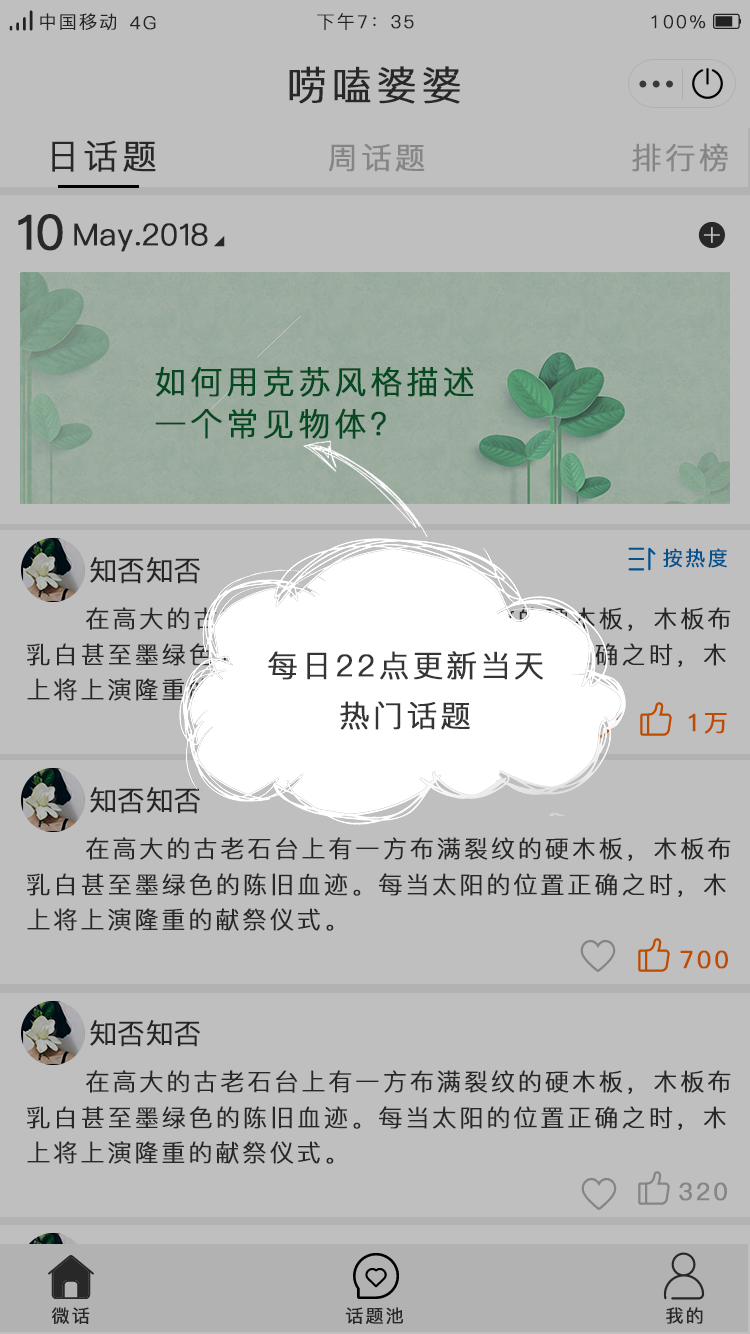
<style>
.page{position:relative;width:750px;height:1334px;background:#bfbfbf}
.page>*{position:absolute;margin:0}
.t1{font:18px "PingFang-SC-Regular";letter-spacing:0.1em;color:#323232;font-weight:bold}
.t2{font:40px "PingFang-SC-Regular";letter-spacing:0.1em;color:#353535;font-weight:bold}
.t3{font:34px "PingFang-SC-Regular";letter-spacing:0.1em;color:#353535;font-weight:bold}
.t4{font:30px "PingFang-SC-Regular";letter-spacing:0.1em;color:#858585;font-weight:bold}
.t5{font:48px "PingFang-SC-Medium";letter-spacing:0.1em;color:#353535;font-weight:bold}
.t6{font:30px "PingFang-SC-Regular";letter-spacing:0.1em;color:#353535;font-weight:bold}
.t7{font:32px/42px "PingFang-SC-Regular";letter-spacing:0.1em;color:#044922;font-weight:bold}
.t8{font:28px "PingFang-SC-Regular";letter-spacing:0.1em;color:#323232;font-weight:bold}
.t9{font:20px "PingFang-SC-Medium";letter-spacing:0.1em;color:#03528e;font-weight:bold}
.t10{font:24px "PingFang-SC-Regular";letter-spacing:0.1em;font-weight:bold}
.t11{font:24px "PingFang-SC-Medium";letter-spacing:0.1em;color:#bd4c02;font-weight:bold}
.t12{font:24px "PingFang-SC-Regular";letter-spacing:0.1em;color:#353535;font-weight:bold}
.t13{font:24px "PingFang-SC-Regular";letter-spacing:0.1em;color:#323232;font-weight:bold}
.t14{font:24px "PingFang-SC-Medium";letter-spacing:0.1em;color:#858585;font-weight:bold}
.t15{font:18px "PingFang-SC-Medium";letter-spacing:0.1em;color:#353535;font-weight:bold}
</style>
<div class="page">
<p class="t1" style="left:40px;top:13px;width:76px;height:18px">中国移动</p>
<p class="t1" style="left:130px;top:16px;width:26px;height:14px">4G</p>
<p class="t1" style="left:317px;top:13px;width:97px;height:17px">下午7：35</p>
<p class="t1" style="left:651px;top:15px;width:55px;height:14px">100%</p>
<p class="t2" style="left:289px;top:66px;width:171px;height:38px">唠嗑婆婆</p>
<p class="t3" style="left:52px;top:140px;width:104px;height:32px">日话题</p>
<p class="t4" style="left:329px;top:144px;width:96px;height:28px">周话题</p>
<p class="t4" style="left:632px;top:143px;width:96px;height:29px">排行榜</p>
<p class="t5" style="left:18px;top:214px;width:45px;height:37px">10</p>
<p class="t6" style="left:74px;top:223px;width:134px;height:29px">May.2018</p>
<p class="t7" style="left:155px;top:366px;width:319px;height:73px">如何用克苏风格描述<br>一个常见物体？</p>
<p class="t8" style="left:90px;top:557px;width:110px;height:27px">知否知否</p>
<p class="t9" style="left:663px;top:548px;width:64px;height:20px">按热度</p>
<p class="t10" style="left:86px;top:607px;width:645px;height:24px">在高大的古老石台上有一方布满裂纹的硬木板，木板布</p>
<p class="t10" style="left:27px;top:643px;width:699px;height:24px">乳白甚至墨绿色的陈旧血迹。每当太阳的位置正确之时，木</p>
<p class="t6" style="left:268px;top:651px;width:275px;height:29px">每日22点更新当天</p>
<p class="t10" style="left:27px;top:678px;width:307px;height:23px">上将上演隆重的献祭仪式。</p>
<p class="t6" style="left:340px;top:701px;width:130px;height:29px">热门话题</p>
<p class="t11" style="left:688px;top:713px;width:39px;height:21px">1万</p>
<p class="t8" style="left:90px;top:787px;width:110px;height:27px">知否知否</p>
<p class="t12" style="left:86px;top:837px;width:645px;height:24px">在高大的古老石台上有一方布满裂纹的硬木板，木板布</p>
<p class="t12" style="left:27px;top:873px;width:699px;height:24px">乳白甚至墨绿色的陈旧血迹。每当太阳的位置正确之时，木</p>
<p class="t12" style="left:27px;top:908px;width:307px;height:23px">上将上演隆重的献祭仪式<span class="t13">。</span></p>
<p class="t11" style="left:680px;top:950px;width:48px;height:19px">700</p>
<p class="t8" style="left:90px;top:1020px;width:110px;height:27px">知否知否</p>
<p class="t12" style="left:86px;top:1070px;width:645px;height:24px">在高大的古老石台上有一方布满裂纹的硬木板，木板布</p>
<p class="t12" style="left:27px;top:1106px;width:699px;height:24px">乳白甚至墨绿色的陈旧血迹。每当太阳的位置正确之时，木</p>
<p class="t12" style="left:27px;top:1141px;width:307px;height:23px">上将上演隆重的献祭仪式<span class="t13">。</span></p>
<p class="t14" style="left:679px;top:1182px;width:48px;height:19px">320</p>
<p class="t15" style="left:52px;top:1307px;width:38px;height:17px">微话</p>
<p class="t15" style="left:345px;top:1307px;width:59px;height:17px">话题池</p>
<p class="t15" style="left:666px;top:1307px;width:37px;height:17px">我的</p>
</div>
